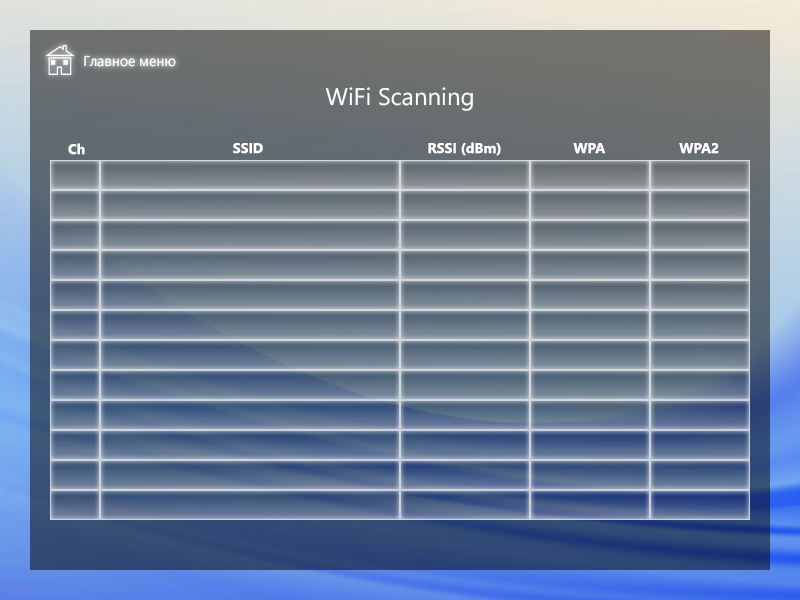
<style>
.page{position:relative;width:800px;height:600px}
.page>*{position:absolute;margin:0}
.t1{font:14.2px "SegoeUI";color:#ffffff}
.t2{font:23.9px "SegoeUI";color:#ffffff}
.t3{font:14px "SegoeUI-Bold";color:#ffffff}
</style>
<div class="page">
<p class="t1" style="left:84px;top:55px;width:92px;height:12px">Главное меню</p>
<p class="t2" style="left:325px;top:87px;width:148px;height:24px">WiFi Scanning</p>
<p class="t3" style="left:68px;top:143px;width:17px;height:12px">Ch</p>
<p class="t3" style="left:233px;top:143px;width:30px;height:11px">SSID</p>
<p class="t3" style="left:428px;top:142px;width:73px;height:14px">RSSI (dBm)</p>
<p class="t3" style="left:573px;top:143px;width:33px;height:11px">WPA</p>
<p class="t3" style="left:679px;top:143px;width:40px;height:11px">WPA2</p>
</div>
